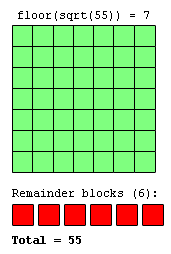
<style>
.page{position:relative;width:171px;height:254px;background:#7fff7f}
.page>*{position:absolute;margin:0}
.t1{font:12px "CourierNewPSMT";color:#000000}
.t2{font:12px "CourierNewPS-BoldMT";color:#000000}
</style>
<div class="page">
<p class="t1" style="left:18px;top:11px;width:131px;height:10px">floor(sqrt(55)) = 7</p>
<p class="t1" style="left:12px;top:189px;width:144px;height:10px">Remainder blocks (6):</p>
<p class="t2" style="left:12px;top:236px;width:69px;height:8px">Total = 55</p>
</div>
